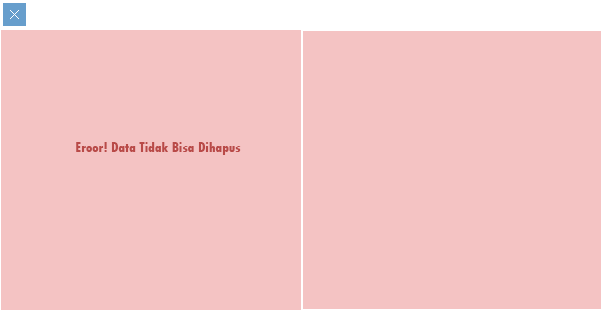
<style>
.page{position:relative;width:602px;height:310px;background:#f4c3c3}
.page>*{position:absolute;margin:0}
.t1{font:14px "TwCenMT-CondensedExtraBold";color:#b94a48}
</style>
<div class="page">
<p class="t1" style="left:76px;top:142px;width:165px;height:13px">Eroor! Data Tidak Bisa Dihapus</p>
</div>
